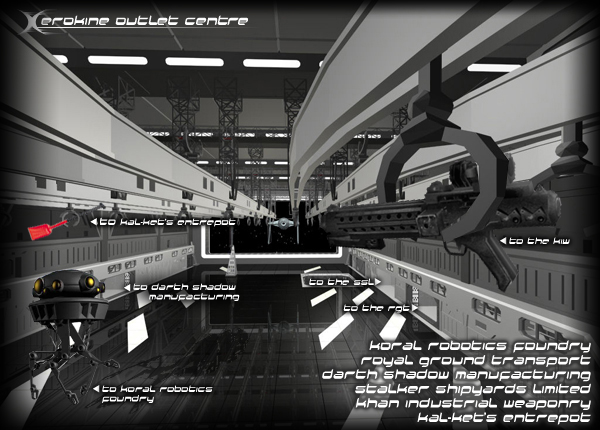
<style>
.page{position:relative;width:600px;height:430px}
.page>*{position:absolute;margin:0}
.t1{font:8px "Halo";color:#ffffff}
.t2{font:12px "Halo";color:#ffffff}
.t3{font:12px "Impact";color:#ffffff}
</style>
<div class="page">
<p class="t1" style="left:133px;top:283px;width:107px;height:18px">to darth shadow<br>    manufacturing</p>
<p class="t2" style="left:322px;top:340px;width:269px;height:85px;text-align:right">koral robotics foundry<br>royal ground transport<br>darth shadow manufacturing<br>stalker shipyards limited<br>khan industrial weaponry<br>kal<span class="t3">-</span>ket<span class="t3">’</span>s entrepot</p>
<p class="t1" style="left:102px;top:385px;width:111px;height:18px">to koral robotics<br>foundry</p>
</div>
